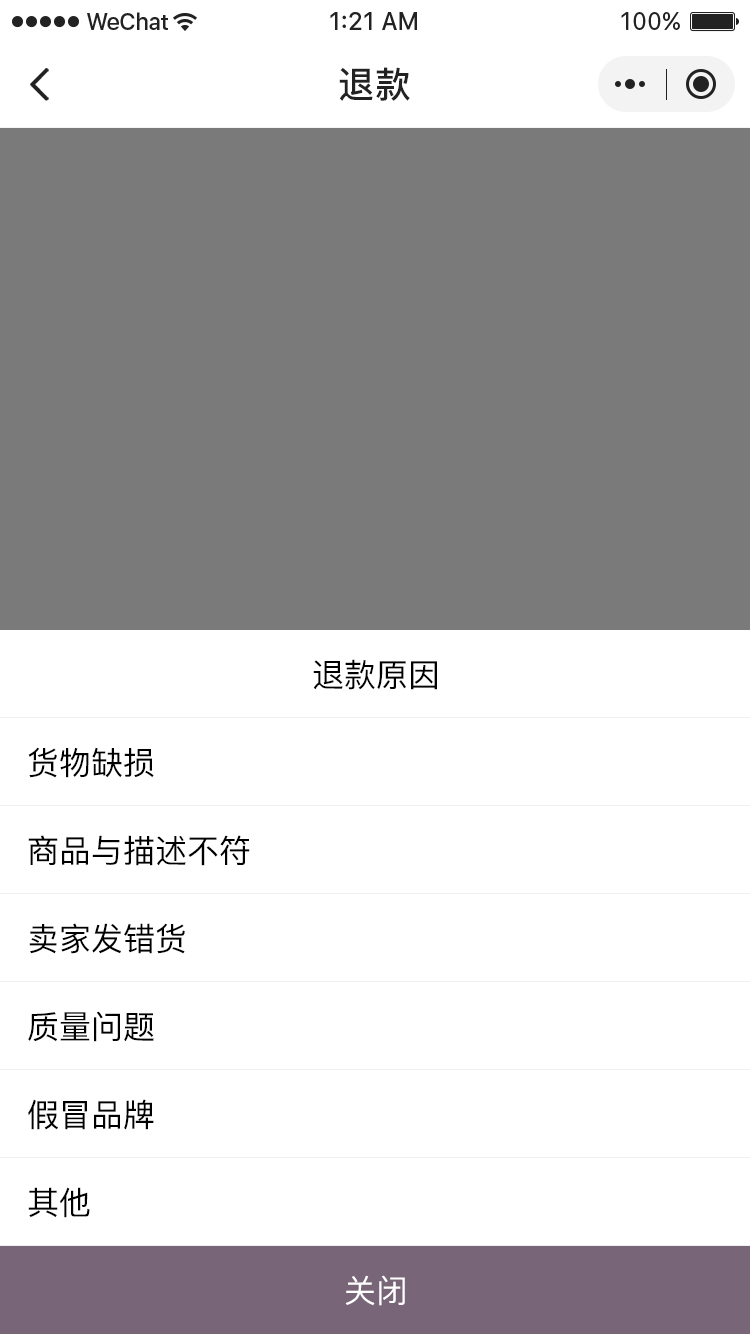
<style>
.page{position:relative;width:750px;height:1334px;background:#ffffff}
.page>*{position:absolute;margin:0}
.t1{font:36px "PingFang-SC-Bold";letter-spacing:0.028em;color:#222222}
.t2{font:32px "PingFang-SC-Medium";color:#000000;text-transform:uppercase}
.t3{font:32px "PingFang-SC-Medium";color:#ffffff;text-transform:uppercase}
</style>
<div class="page">
<p class="t1" style="left:339px;top:67px;width:71px;height:34px">退款</p>
<p class="t2" style="left:313px;top:659px;width:124px;height:31px">退款原因</p>
<p class="t2" style="left:28px;top:747px;width:126px;height:31px">货物缺损</p>
<p class="t2" style="left:28px;top:835px;width:222px;height:31px">商品与描述不符</p>
<p class="t2" style="left:29px;top:923px;width:156px;height:31px">卖家发错货</p>
<p class="t2" style="left:28px;top:1011px;width:126px;height:31px">质量问题</p>
<p class="t2" style="left:28px;top:1099px;width:126px;height:31px">假冒品牌</p>
<p class="t2" style="left:28px;top:1187px;width:62px;height:31px">其他</p>
<p class="t3" style="left:345px;top:1275px;width:60px;height:31px">关闭</p>
</div>
